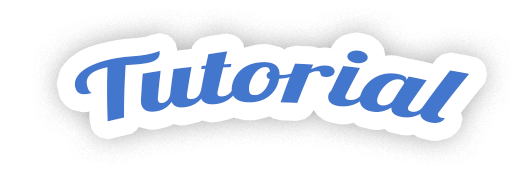
<style>
.page{position:relative;width:532px;height:188px;background:#ffffff}
.page>*{position:absolute;margin:0}
.t1{font:75px "Lobster1.4";color:#4377cd}
</style>
<div class="page">
<p class="t1" style="left:74px;top:50px;width:396px;height:73px">Tutorial</p>
</div>
